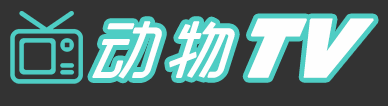
<style>
.page{position:relative;width:388px;height:106px;background:#333333}
.page>*{position:absolute;margin:0}
.t1{font:63.5px "RTWSYueGoTrial-Regular";letter-spacing:0.18em;color:#fefefe;text-transform:uppercase;font-weight:bold;scale:0.95 1}
.t2{font:82.9px "AvenirNext-HeavyItalic";letter-spacing:0.05em;color:#fefefe;text-transform:uppercase;font-weight:bold;scale:0.97 1}
</style>
<div class="page">
<p class="t1" style="left:92px;top:21px;width:143px;height:58px">动物</p>
<p class="t2" style="left:247px;top:18px;width:127px;height:60px">TV</p>
</div>
